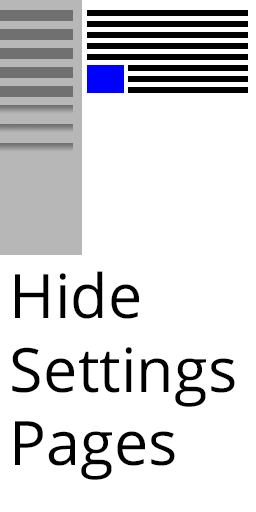
<style>
.page{position:relative;width:256px;height:512px;background:#ffffff}
.page>*{position:absolute;margin:0}
.t1{font:61.3px "OpenSans";color:#000000}
</style>
<div class="page">
<p class="t1" style="left:12px;top:271px;width:223px;height:209px">Hide<br>Settings<br>Pages</p>
</div>
